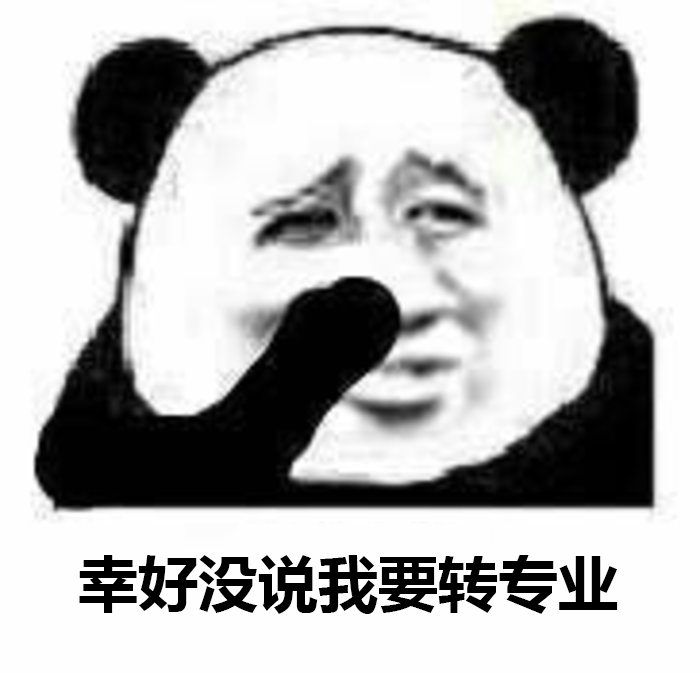
<style>
.page{position:relative;width:700px;height:673px;background:#fefefe}
.page>*{position:absolute;margin:0}
.t1{font:60px "MicrosoftYaHei-Bold";color:#000000}
</style>
<div class="page">
<p class="t1" style="left:79px;top:555px;width:539px;height:59px">幸好没说我要转专业</p>
</div>
